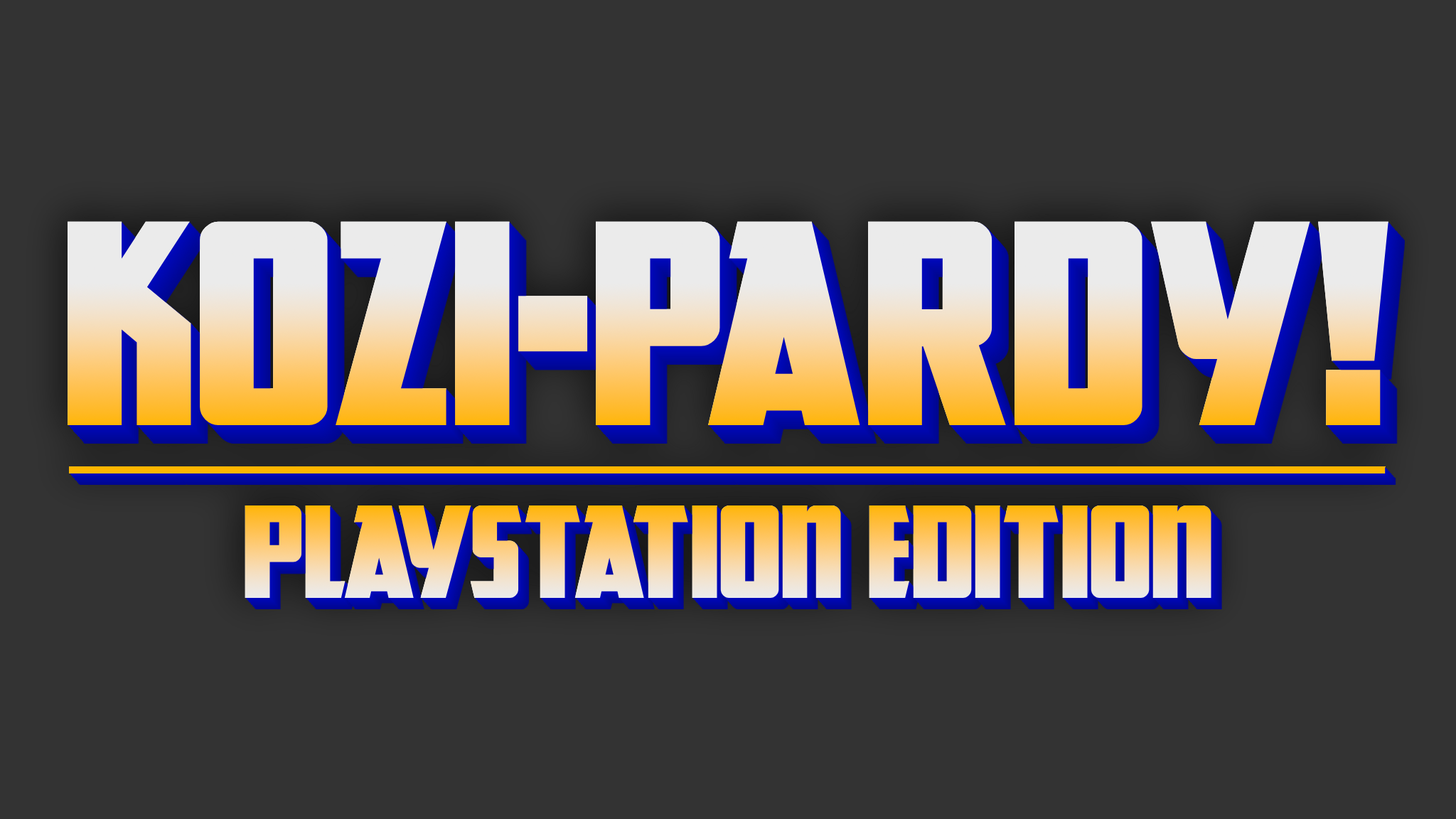
<style>
.page{position:relative;width:1456px;height:819px;background:#333333}
.page>*{position:absolute;margin:0}
.t1{font:240.3px "GreatLakesNF"}
.t2{font:109.2px "GreatLakesNF"}
</style>
<div class="page">
<p class="t1" style="left:68px;top:221px;width:1320px;height:204px">KOZI-PARDY!</p>
<p class="t2" style="left:245px;top:505px;width:966px;height:93px">PLAYSTATION EDITION</p>
</div>
